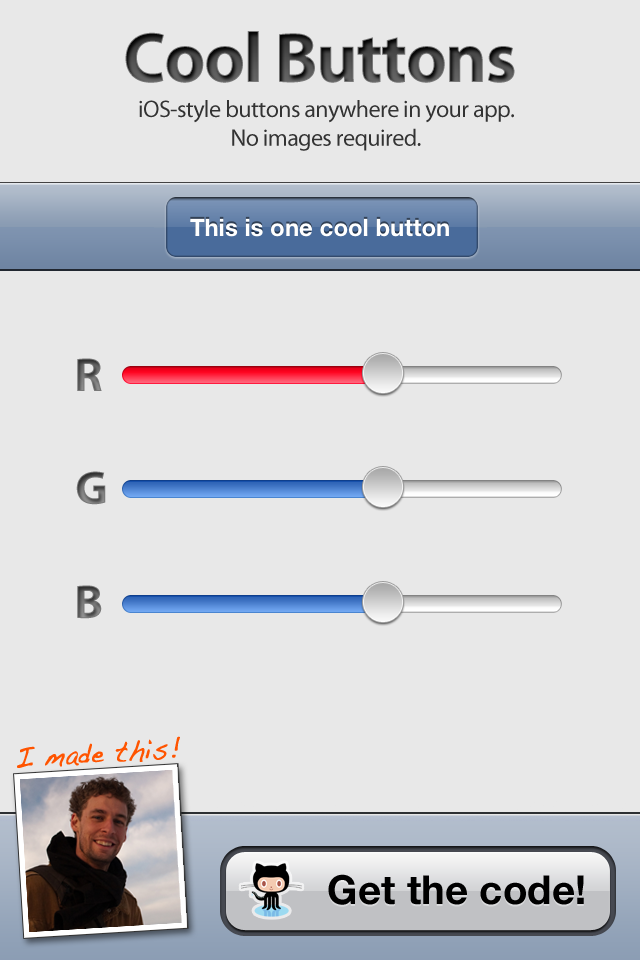
<style>
.page{position:relative;width:640px;height:960px;background:#e8e8e8}
.page>*{position:absolute;margin:0}
.t1{font:72px "MyriadPro-Bold";letter-spacing:-0.025em}
.t2{font:24px "MyriadPro-Regular";letter-spacing:-0.025em;color:#333333}
.t3{font:48px "MyriadPro-Bold";letter-spacing:-0.025em}
.t4{font:28.8px "Handwriting-Dakota";letter-spacing:0.025em;color:#ff5400;font-weight:bold;scale:0.83 1}
</style>
<div class="page">
<p class="t1" style="left:125px;top:31px;width:390px;height:52px">Cool Buttons</p>
<p class="t2" style="left:139px;top:100px;width:375px;height:51px;text-align:center">iOS-style buttons anywhere in your app.<br>No images required.</p>
<p class="t3" style="left:77px;top:358px;width:25px;height:33px">R</p>
<p class="t3" style="left:76px;top:471px;width:30px;height:34px">G</p>
<p class="t3" style="left:77px;top:585px;width:25px;height:34px">B</p>
<p class="t4" style="left:17px;top:736px;width:163px;height:32px;rotate:-3deg">I made this!</p>
</div>
